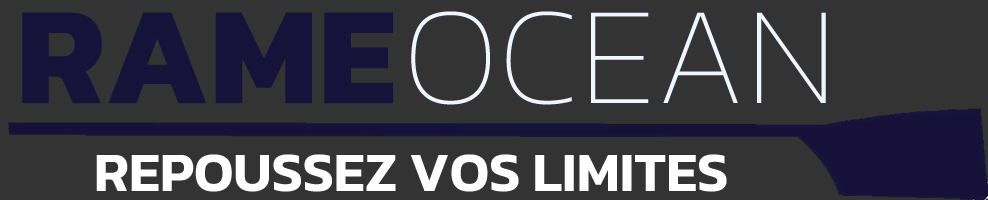
<style>
.page{position:relative;width:988px;height:200px;background:#333333}
.page>*{position:absolute;margin:0}
.t1{font:140.4px "Kanit-Bold";color:#15133a}
.t2{font:139.7px "Kanit-Thin";color:#eef6ff}
.t3{font:56px "Kanit-SemiBold";color:#ffffff}
</style>
<div class="page">
<p class="t1" style="left:22px;top:12px;width:371px;height:92px">RAME</p>
<p class="t2" style="left:411px;top:11px;width:415px;height:94px">OCEAN</p>
<p class="t3" style="left:96px;top:154px;width:631px;height:38px">REPOUSSEZ VOS LIMITES</p>
</div>
